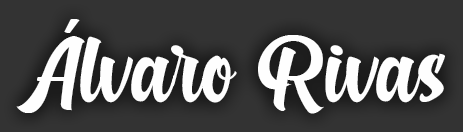
<style>
.page{position:relative;width:463px;height:132px;background:#333333}
.page>*{position:absolute;margin:0}
.t1{font:75px "Dalgona";color:#fefefe}
</style>
<div class="page">
<p class="t1" style="left:16px;top:19px;width:429px;height:95px">Álvaro Rivas</p>
</div>
